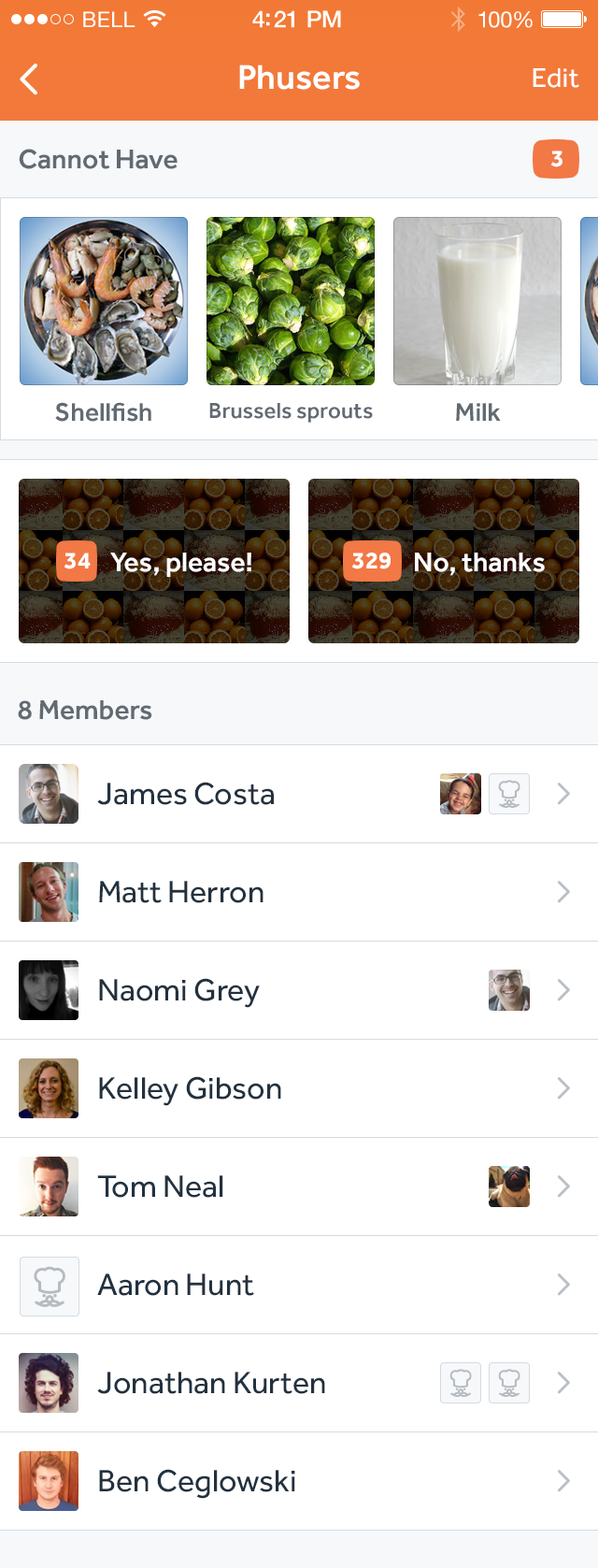
<style>
.page{position:relative;width:598px;height:1568px;background:#ffffff}
.page>*{position:absolute;margin:0}
.t1{font:21.5px "HelveticaNeue";letter-spacing:0.02em;color:#ffffff}
.t2{font:23.4px "HelveticaNeue-Medium";letter-spacing:-0.02em;color:#ffffff}
.t3{font:22.4px "HelveticaNeue";letter-spacing:-0.02em;color:#ffffff}
.t4{font:35.5px "Effra-Medium";color:#ffffff}
.t5{font:28.1px "Effra-Regular";color:#ffffff}
.t6{font:28.1px "Effra-Medium";color:#626a73}
.t7{font:24.3px "Effra-Bold";color:#ffffff}
.t8{font:26.2px "Effra-Medium";color:#626a73}
.t9{font:22.4px "Effra-Medium";color:#626a73}
.t10{font:28.1px "Effra-Medium";color:#ffffff}
.t11{font:31.8px "Effra-Regular";color:#22313f}
</style>
<div class="page">
<p class="t1" style="left:83px;top:11px;width:53px;height:16px">BELL</p>
<p class="t2" style="left:252px;top:10px;width:89px;height:18px">4:21 PM</p>
<p class="t3" style="left:479px;top:11px;width:54px;height:17px">100%</p>
<p class="t4" style="left:239px;top:65px;width:121px;height:25px">Phusers</p>
<p class="t5" style="left:533px;top:68px;width:47px;height:20px">Edit</p>
<p class="t6" style="left:19px;top:149px;width:159px;height:20px">Cannot Have</p>
<p class="t7" style="left:551px;top:151px;width:12px;height:16px">3</p>
<p class="t8" style="left:55px;top:402px;width:96px;height:20px">Shellfish</p>
<p class="t9" style="left:209px;top:403px;width:164px;height:20px">Brussels sprouts</p>
<p class="t8" style="left:456px;top:403px;width:45px;height:18px">Milk</p>
<p class="t7" style="left:64px;top:553px;width:27px;height:16px">34</p>
<p class="t10" style="left:110px;top:553px;width:142px;height:24px">Yes, please!</p>
<p class="t7" style="left:352px;top:553px;width:39px;height:16px">329</p>
<p class="t10" style="left:415px;top:553px;width:130px;height:23px">No, thanks</p>
<p class="t6" style="left:18px;top:700px;width:134px;height:20px">8 Members</p>
<p class="t11" style="left:97px;top:782px;width:177px;height:23px">James Costa</p>
<p class="t11" style="left:99px;top:881px;width:165px;height:22px">Matt Herron</p>
<p class="t11" style="left:99px;top:978px;width:161px;height:30px">Naomi Grey</p>
<p class="t11" style="left:99px;top:1076px;width:182px;height:30px">Kelley Gibson</p>
<p class="t11" style="left:97px;top:1175px;width:126px;height:23px">Tom Neal</p>
<p class="t11" style="left:97px;top:1273px;width:157px;height:23px">Aaron Hunt</p>
<p class="t11" style="left:97px;top:1372px;width:228px;height:22px">Jonathan Kurten</p>
<p class="t11" style="left:99px;top:1469px;width:196px;height:30px">Ben Ceglowski</p>
</div>
